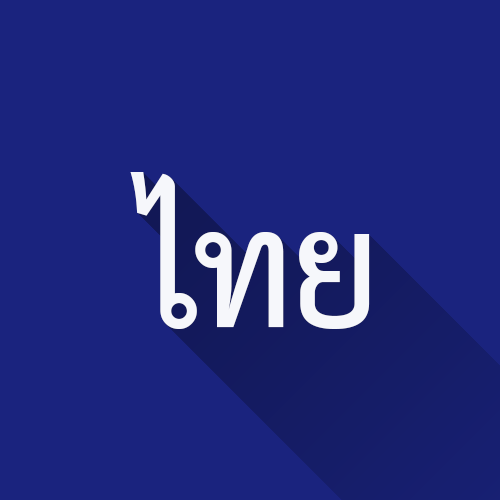
<style>
.page{position:relative;width:500px;height:500px;background:#1a237e}
.page>*{position:absolute;margin:0}
.t1{font:233.3px "THSarabunNew-Bold";letter-spacing:-0.02em;color:#f6f7fb}
</style>
<div class="page">
<p class="t1" style="left:130px;top:172px;width:240px;height:157px">ไทย</p>
</div>
